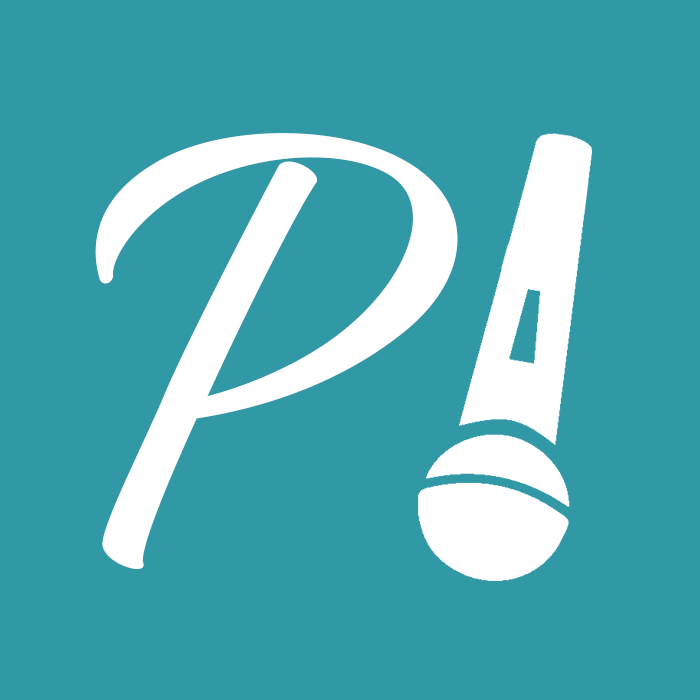
<style>
.page{position:relative;width:700px;height:700px;background:#3199a6}
.page>*{position:absolute;margin:0}
.t1{font:600px "Relation";color:#ffffff}
</style>
<div class="page">
<p class="t1" style="left:95px;top:133px;width:363px;height:436px">P</p>
</div>
